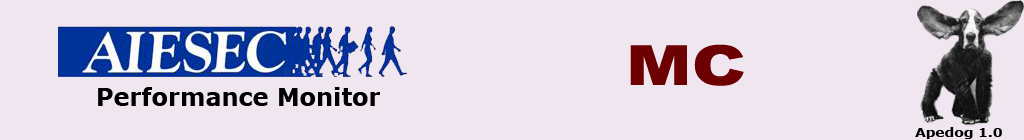
<style>
.page{position:relative;width:1024px;height:140px;background:#f0e6f0}
.page>*{position:absolute;margin:0}
.t1{font:55.2px "Arial-Black";color:#6d0000;scale:1.26 1}
.t2{font:24px "Verdana-Bold";color:#000000}
.t3{font:12px "Verdana-Bold";color:#000000;scale:1.15 1}
</style>
<div class="page">
<p class="t1" style="left:630px;top:44px;width:114px;height:42px">MC</p>
<p class="t2" style="left:98px;top:87px;width:282px;height:19px">Performance Monitor</p>
<p class="t3" style="left:915px;top:127px;width:87px;height:12px">Apedog 1.0</p>
</div>
